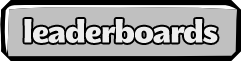
<style>
.page{position:relative;width:241px;height:61px;background:#c0c0c0}
.page>*{position:absolute;margin:0}
.t1{font:28px "MEgalopolisExtra";letter-spacing:-0.05em;color:#ededed}
</style>
<div class="page">
<p class="t1" style="left:24px;top:19px;width:194px;height:24px">leaderboards</p>
</div>
